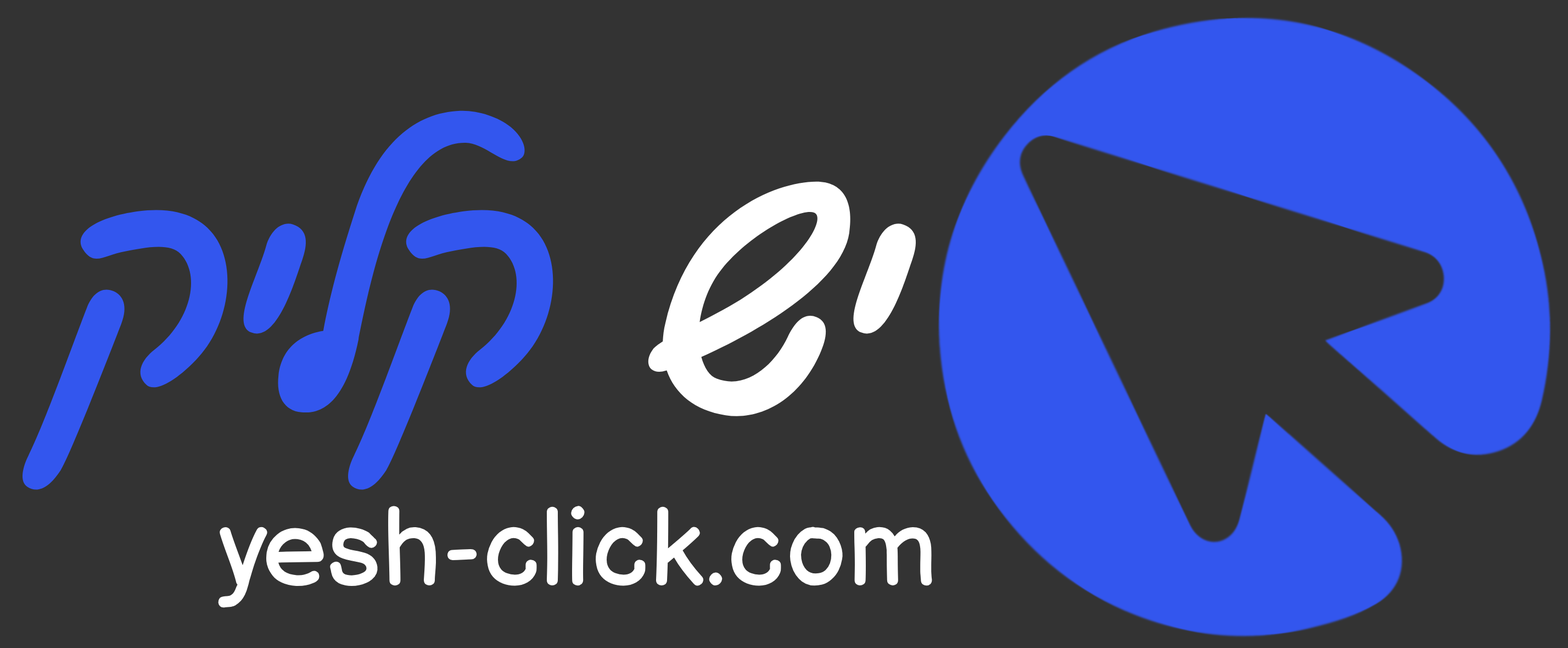
<style>
.page{position:relative;width:1568px;height:648px;background:#333333}
.page>*{position:absolute;margin:0}
.t1{font:329.4px "GveretLevinAlefAlefAlef-Regular";color:#3356ee}
.t2{font:329.4px "GveretLevinAlefAlefAlef-Regular";color:#ffffff}
.t3{font:109.8px "BalsamiqSans-Regular";color:#ffffff}
</style>
<div class="page">
<p class="t1" style="left:19px;top:110px;width:900px;height:384px"><span class="t2">יש </span>קליק</p>
<p class="t3" style="left:218px;top:505px;width:714px;height:103px">yesh-click.com</p>
</div>
